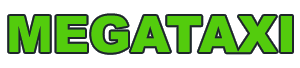
<style>
.page{position:relative;width:300px;height:68px;background:#ffffff}
.page>*{position:absolute;margin:0}
.t1{font:50px "Arial-Black";color:#53cc0d}
</style>
<div class="page">
<p class="t1" style="left:9px;top:15px;width:283px;height:38px">MEGATAXI</p>
</div>
